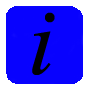
<style>
.page{position:relative;width:90px;height:90px;background:#0802fe}
.page>*{position:absolute;margin:0}
.t1{font:120px "Vijaya";color:#000003}
</style>
<div class="page">
<p class="t1" style="left:32px;top:12px;width:23px;height:63px">i</p>
</div>
